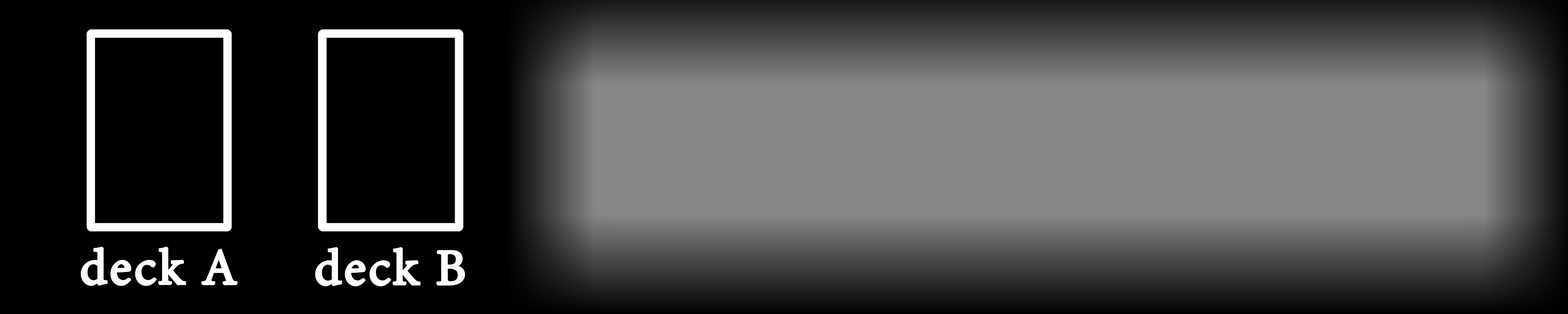
<style>
.page{position:relative;width:1568px;height:314px;background:#000000}
.page>*{position:absolute;margin:0}
.t1{font:62.1px "AdobeThai-Regular";letter-spacing:0.02em;color:#ffffff;font-weight:bold}
</style>
<div class="page">
<p class="t1" style="left:81px;top:247px;width:157px;height:40px">deck A</p>
<p class="t1" style="left:315px;top:247px;width:150px;height:40px">deck B</p>
</div>
